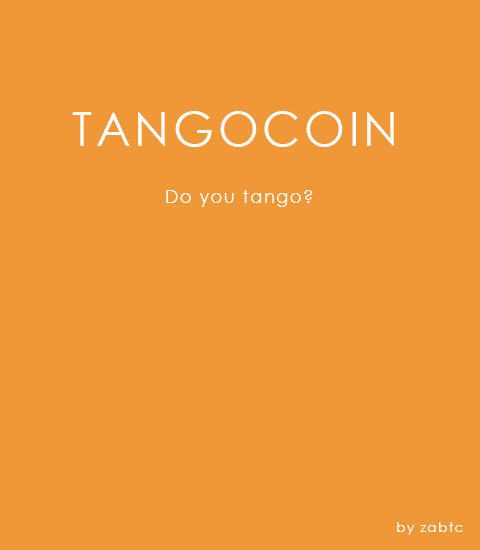
<style>
.page{position:relative;width:480px;height:550px;background:#f09837}
.page>*{position:absolute;margin:0}
.t1{font:47px "CenturyGothic";letter-spacing:0.08em;color:#ffffff}
.t2{font:18px "CenturyGothic";letter-spacing:0.08em;color:#ffffff}
.t3{font:14px "CenturyGothic";letter-spacing:0.08em;color:#ffffff}
</style>
<div class="page">
<p class="t1" style="left:72px;top:111px;width:322px;height:36px">TANGOCOIN</p>
<p class="t2" style="left:166px;top:190px;width:147px;height:17px">Do you tango?</p>
<p class="t3" style="left:397px;top:522px;width:66px;height:13px">by zabtc</p>
</div>
